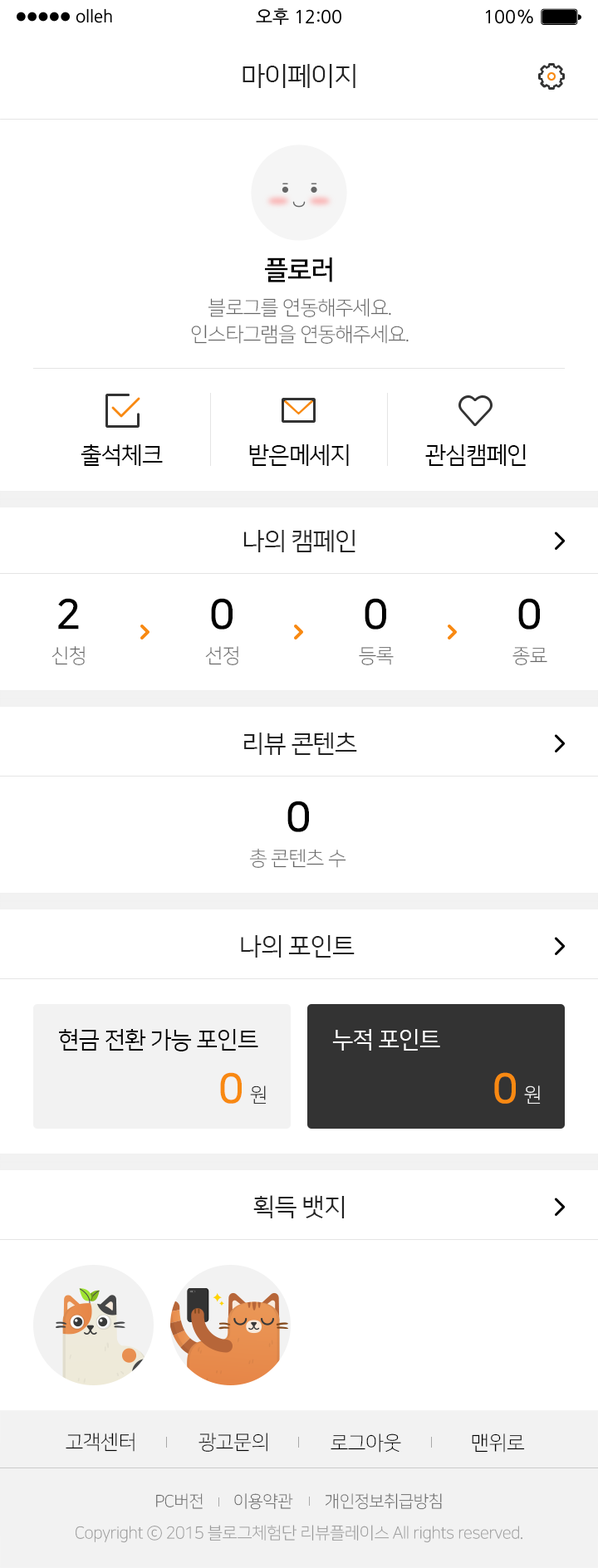
<style>
.page{position:relative;width:598px;height:1568px;background:#ffffff}
.page>*{position:absolute;margin:0}
.t1{font:26.6px "NanumSquareR";letter-spacing:-0.03em;color:#222222}
.t2{font:26.6px "NanumSquareB";letter-spacing:-0.03em;color:#000000}
.t3{font:19.9px/26.6px "NanumSquareL";letter-spacing:-0.03em;color:#666666}
.t4{font:23.3px "NanumSquareR";letter-spacing:-0.03em;color:#000000}
.t5{font:24.9px "NanumSquareR";letter-spacing:-0.03em;color:#222222}
.t6{font:41.5px "NanumSquareB";letter-spacing:-0.03em;color:#000000}
.t7{font:19.9px "NanumSquareL";letter-spacing:-0.03em;color:#666666}
.t8{font:23.3px "NanumSquareR";letter-spacing:-0.03em;color:#ffffff}
.t9{font:41.5px "NanumSquareB";letter-spacing:-0.03em;color:#f88912}
.t10{font:19.9px "NanumSquareL";letter-spacing:-0.03em}
.t11{font:19.9px "NanumSquareL";letter-spacing:-0.03em;color:#ffffff}
.t12{font:19.9px "NanumSquareL";letter-spacing:-0.02em;color:#000000}
.t13{font:16.6px "NanumSquareL";letter-spacing:-0.02em;color:#666666}
.t14{font:16.6px "NanumSquareL";letter-spacing:-0.02em;color:#999999}
</style>
<div class="page">
<p class="t1" style="left:243px;top:64px;width:112px;height:24px">마이페이지</p>
<p class="t2" style="left:265px;top:257px;width:67px;height:25px">플로러</p>
<p class="t3" style="left:191px;top:298px;width:218px;height:46px;text-align:center">블로그를 연동해주세요.<br>인스타그램을 연동해주세요.</p>
<p class="t4" style="left:81px;top:444px;width:82px;height:22px">출석체크</p>
<p class="t4" style="left:249px;top:444px;width:100px;height:22px">받은메세지</p>
<p class="t4" style="left:425px;top:444px;width:101px;height:22px">관심캠페인</p>
<p class="t5" style="left:243px;top:530px;width:112px;height:22px">나의 캠페인</p>
<p class="t6" style="left:58px;top:598px;width:21px;height:32px">2</p>
<p class="t6" style="left:211px;top:598px;width:22px;height:32px">0</p>
<p class="t6" style="left:365px;top:598px;width:21px;height:32px">0</p>
<p class="t6" style="left:518px;top:598px;width:22px;height:32px">0</p>
<p class="t7" style="left:51px;top:646px;width:34px;height:19px">신청</p>
<p class="t7" style="left:205px;top:646px;width:33px;height:19px">선정</p>
<p class="t7" style="left:359px;top:647px;width:35px;height:18px">등록</p>
<p class="t7" style="left:512px;top:647px;width:35px;height:18px">종료</p>
<p class="t5" style="left:244px;top:733px;width:113px;height:22px">리뷰 콘텐츠</p>
<p class="t6" style="left:287px;top:801px;width:22px;height:31px">0</p>
<p class="t7" style="left:249px;top:848px;width:97px;height:20px">총 콘텐츠 수</p>
<p class="t5" style="left:241px;top:935px;width:114px;height:23px">나의 포인트</p>
<p class="t4" style="left:59px;top:1029px;width:199px;height:22px">현금 전환 가능 포인트</p>
<p class="t8" style="left:332px;top:1029px;width:108px;height:22px">누적 포인트</p>
<p class="t9" style="left:220px;top:1072px;width:22px;height:32px">0</p>
<p class="t9" style="left:494px;top:1072px;width:22px;height:32px">0</p>
<p class="t10" style="left:250px;top:1085px;width:17px;height:19px">원</p>
<p class="t11" style="left:524px;top:1085px;width:17px;height:19px">원</p>
<p class="t5" style="left:253px;top:1195px;width:92px;height:23px">획득 뱃지</p>
<p class="t12" style="left:66px;top:1433px;width:69px;height:19px">고객센터</p>
<p class="t12" style="left:198px;top:1433px;width:69px;height:19px">광고문의</p>
<p class="t12" style="left:331px;top:1433px;width:70px;height:20px">로그아웃</p>
<p class="t12" style="left:472px;top:1433px;width:53px;height:20px">맨위로</p>
<p class="t13" style="left:156px;top:1493px;width:47px;height:16px">PC버전</p>
<p class="t13" style="left:234px;top:1493px;width:59px;height:17px">이용약관</p>
<p class="t13" style="left:326px;top:1493px;width:116px;height:17px">개인정보취급방침</p>
<p class="t14" style="left:76px;top:1525px;width:446px;height:18px">Copyright ⓒ 2015 블로그체험단 리뷰플레이스 All rights reserved.</p>
</div>
